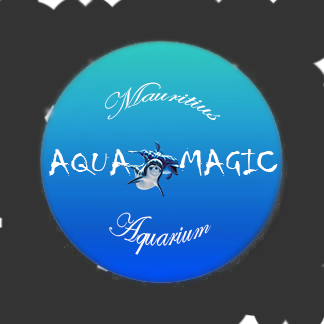
<style>
.page{position:relative;width:324px;height:324px;background:#333333}
.page>*{position:absolute;margin:0}
.t1{font:27.2px "EdwardianScriptITC";color:#ffffff;scale:1.18 1}
.t2{font:36.5px "Chiller-Regular";color:#ffffff;scale:1.18 1}
</style>
<div class="page">
<p class="t1" style="left:105px;top:82px;width:116px;height:39px">Mauritius</p>
<p class="t2" style="left:48px;top:148px;width:230px;height:28px">AQUA    MAGIC</p>
<p class="t1" style="left:109px;top:212px;width:102px;height:43px">Aquarium</p>
</div>
